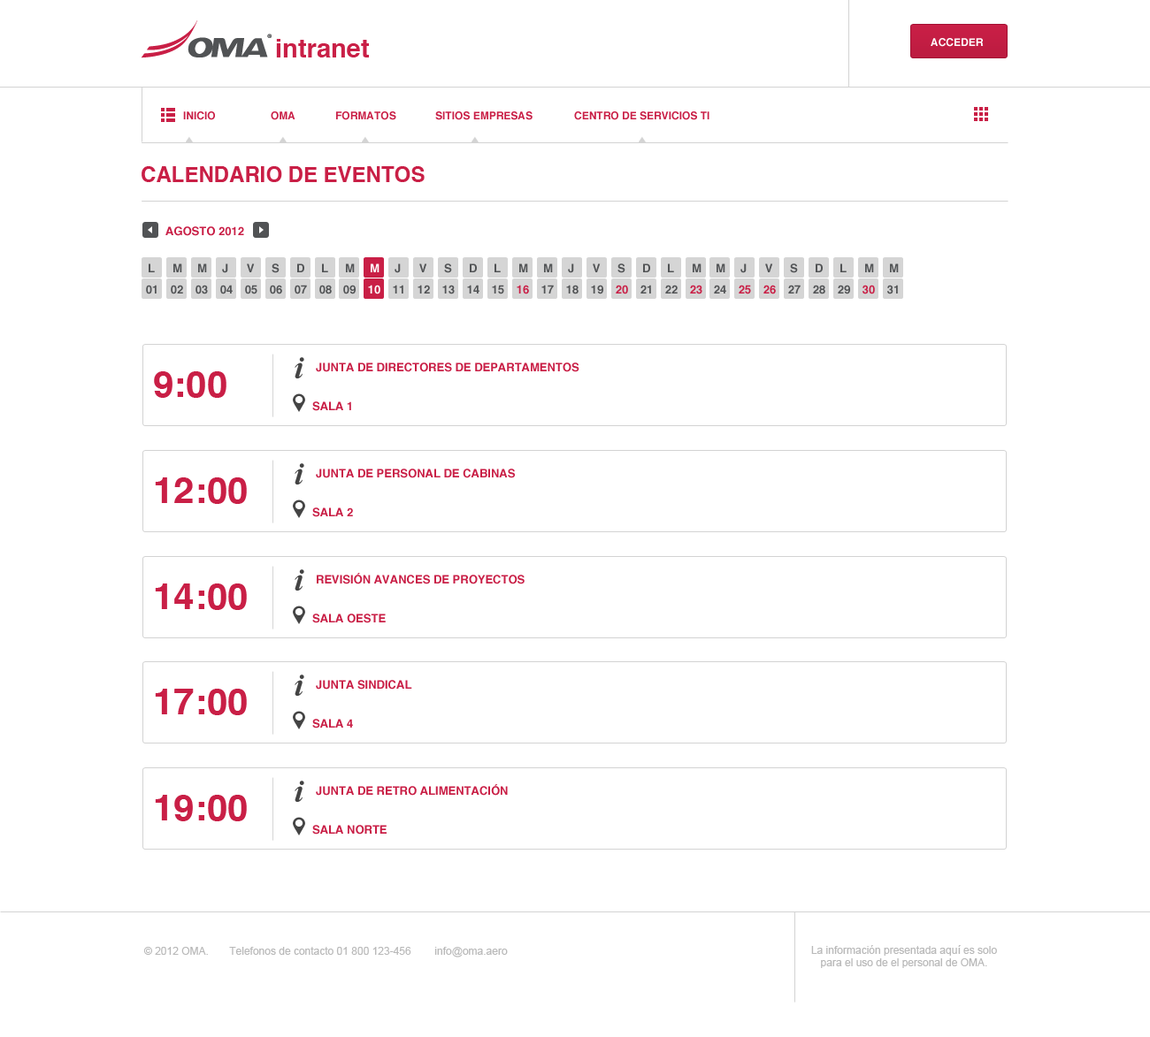
<style>
.page{position:relative;width:1150px;height:1037px;background:#ffffff}
.page>*{position:absolute;margin:0}
.t1{font:25.7px "Helvetica-Bold";color:#c91f46}
.t2{font:10.6px "Helvetica-Bold";color:#ffffff;text-transform:uppercase}
.t3{font:10.6px "Helvetica-Bold";color:#c91f46}
.t4{font:10.6px "Helvetica-Bold";color:#c91f46;text-transform:uppercase}
.t5{font:21.2px "Helvetica-Bold";color:#c91f46;text-transform:uppercase}
.t6{font:11.5px "Helvetica-Bold";color:#c91f46;text-transform:uppercase}
.t7{font:11.5px "Helvetica-Bold";color:#515355;text-transform:uppercase}
.t8{font:11.5px "Helvetica-Bold";color:#ffffff;text-transform:uppercase}
.t9{font:37.1px "Helvetica-Bold";color:#c91f46;text-transform:uppercase}
.t10{font:10.6px "ArialMT";color:#b9b9b9}
</style>
<div class="page">
<p class="t1" style="left:276px;top:39px;width:93px;height:18px">intranet</p>
<p class="t2" style="left:930px;top:38px;width:53px;height:9px">Acceder</p>
<p class="t3" style="left:183px;top:111px;width:32px;height:9px">INICIO</p>
<p class="t3" style="left:271px;top:111px;width:24px;height:9px">OMA</p>
<p class="t4" style="left:336px;top:111px;width:60px;height:9px">formatos</p>
<p class="t4" style="left:435px;top:111px;width:97px;height:9px">sitios empresas</p>
<p class="t4" style="left:574px;top:111px;width:135px;height:9px">centro de servicios ti</p>
<p class="t5" style="left:141px;top:166px;width:283px;height:16px">calendario de eventos</p>
<p class="t6" style="left:165px;top:226px;width:79px;height:10px">AGOSTO 2012</p>
<p class="t7" style="left:149px;top:264px;width:6px;height:8px">L</p>
<p class="t7" style="left:173px;top:264px;width:9px;height:8px">M</p>
<p class="t7" style="left:198px;top:264px;width:9px;height:8px">M</p>
<p class="t7" style="left:222px;top:264px;width:6px;height:9px">J</p>
<p class="t7" style="left:247px;top:264px;width:8px;height:8px">V</p>
<p class="t7" style="left:271px;top:264px;width:8px;height:9px">S</p>
<p class="t7" style="left:297px;top:264px;width:7px;height:8px">D</p>
<p class="t7" style="left:322px;top:264px;width:6px;height:8px">L</p>
<p class="t7" style="left:346px;top:264px;width:9px;height:8px">M</p>
<p class="t8" style="left:371px;top:264px;width:8px;height:8px">M</p>
<p class="t7" style="left:394px;top:264px;width:7px;height:9px">J</p>
<p class="t7" style="left:419px;top:264px;width:8px;height:8px">V</p>
<p class="t7" style="left:444px;top:264px;width:8px;height:9px">S</p>
<p class="t7" style="left:470px;top:264px;width:7px;height:8px">D</p>
<p class="t7" style="left:494px;top:264px;width:7px;height:8px">L</p>
<p class="t7" style="left:519px;top:264px;width:9px;height:8px">M</p>
<p class="t7" style="left:544px;top:264px;width:9px;height:8px">M</p>
<p class="t7" style="left:568px;top:264px;width:6px;height:9px">J</p>
<p class="t7" style="left:592px;top:264px;width:8px;height:8px">V</p>
<p class="t7" style="left:617px;top:264px;width:8px;height:9px">S</p>
<p class="t7" style="left:643px;top:264px;width:7px;height:8px">D</p>
<p class="t7" style="left:668px;top:264px;width:6px;height:8px">L</p>
<p class="t7" style="left:692px;top:264px;width:9px;height:8px">M</p>
<p class="t7" style="left:716px;top:264px;width:9px;height:8px">M</p>
<p class="t7" style="left:740px;top:264px;width:6px;height:9px">J</p>
<p class="t7" style="left:765px;top:264px;width:8px;height:8px">V</p>
<p class="t7" style="left:790px;top:264px;width:8px;height:9px">S</p>
<p class="t7" style="left:815px;top:264px;width:7px;height:8px">D</p>
<p class="t7" style="left:840px;top:264px;width:6px;height:8px">L</p>
<p class="t7" style="left:865px;top:264px;width:9px;height:8px">M</p>
<p class="t7" style="left:890px;top:264px;width:8px;height:8px">M</p>
<p class="t7" style="left:146px;top:285px;width:11px;height:9px">01</p>
<p class="t7" style="left:171px;top:285px;width:12px;height:9px">02</p>
<p class="t7" style="left:195px;top:285px;width:13px;height:9px">03</p>
<p class="t7" style="left:220px;top:285px;width:13px;height:9px">04</p>
<p class="t7" style="left:245px;top:285px;width:12px;height:9px">05</p>
<p class="t7" style="left:270px;top:285px;width:12px;height:9px">06</p>
<p class="t7" style="left:294px;top:285px;width:13px;height:9px">07</p>
<p class="t7" style="left:319px;top:285px;width:13px;height:9px">08</p>
<p class="t7" style="left:343px;top:285px;width:12px;height:9px">09</p>
<p class="t8" style="left:368px;top:285px;width:12px;height:9px">10</p>
<p class="t7" style="left:393px;top:285px;width:10px;height:9px">11</p>
<p class="t7" style="left:417px;top:285px;width:13px;height:9px">12</p>
<p class="t7" style="left:442px;top:285px;width:13px;height:9px">13</p>
<p class="t7" style="left:467px;top:285px;width:12px;height:9px">14</p>
<p class="t7" style="left:492px;top:285px;width:12px;height:9px">15</p>
<p class="t6" style="left:516px;top:285px;width:13px;height:9px">16</p>
<p class="t7" style="left:541px;top:285px;width:13px;height:9px">17</p>
<p class="t7" style="left:566px;top:285px;width:12px;height:9px">18</p>
<p class="t7" style="left:591px;top:285px;width:12px;height:9px">19</p>
<p class="t6" style="left:615px;top:285px;width:13px;height:9px">20</p>
<p class="t7" style="left:640px;top:285px;width:11px;height:9px">21</p>
<p class="t7" style="left:665px;top:285px;width:12px;height:9px">22</p>
<p class="t6" style="left:690px;top:285px;width:12px;height:9px">23</p>
<p class="t7" style="left:714px;top:285px;width:12px;height:9px">24</p>
<p class="t6" style="left:738px;top:285px;width:13px;height:9px">25</p>
<p class="t6" style="left:763px;top:285px;width:13px;height:9px">26</p>
<p class="t7" style="left:788px;top:285px;width:12px;height:9px">27</p>
<p class="t7" style="left:813px;top:285px;width:12px;height:9px">28</p>
<p class="t7" style="left:837px;top:285px;width:13px;height:9px">29</p>
<p class="t6" style="left:862px;top:285px;width:13px;height:9px">30</p>
<p class="t7" style="left:887px;top:285px;width:11px;height:9px">31</p>
<p class="t6" style="left:316px;top:363px;width:263px;height:9px">Junta de directores de departamentos</p>
<p class="t9" style="left:154px;top:371px;width:72px;height:27px">9:00</p>
<p class="t6" style="left:312px;top:401px;width:39px;height:10px">sala 1</p>
<p class="t6" style="left:316px;top:469px;width:199px;height:9px">junta de personal de cabinas</p>
<p class="t9" style="left:155px;top:478px;width:92px;height:26px">12:00</p>
<p class="t6" style="left:312px;top:508px;width:41px;height:9px">sala 2</p>
<p class="t6" style="left:317px;top:573px;width:207px;height:12px">revisión avances de proyectos</p>
<p class="t9" style="left:155px;top:584px;width:92px;height:26px">14:00</p>
<p class="t6" style="left:312px;top:614px;width:74px;height:9px">sala oeste</p>
<p class="t9" style="left:155px;top:689px;width:92px;height:26px">17:00</p>
<p class="t6" style="left:316px;top:680px;width:96px;height:10px">junta sindical</p>
<p class="t6" style="left:312px;top:719px;width:41px;height:10px">sala 4</p>
<p class="t6" style="left:316px;top:784px;width:192px;height:12px">Junta de retro alimentación</p>
<p class="t9" style="left:155px;top:795px;width:92px;height:27px">19:00</p>
<p class="t6" style="left:312px;top:825px;width:74px;height:10px">sala Norte</p>
<p class="t10" style="left:143px;top:947px;width:365px;height:11px">© 2012 OMA.       Telefonos de contacto 01 800 123-456        info@oma.aero</p>
<p class="t10" style="left:811px;top:945px;width:186px;height:23px;text-align:center">La información presentada aquí es solo<br>para el uso de el personal de OMA.</p>
</div>
